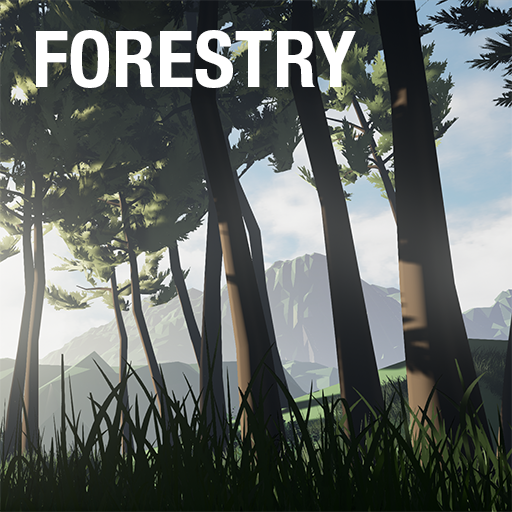
<style>
.page{position:relative;width:512px;height:512px}
.page>*{position:absolute;margin:0}
.t1{font:78.9px "HelveticaNeueLTPro-BdCn";color:#ffffff}
</style>
<div class="page">
<p class="t1" style="left:36px;top:30px;width:320px;height:58px">FORESTRY</p>
</div>
